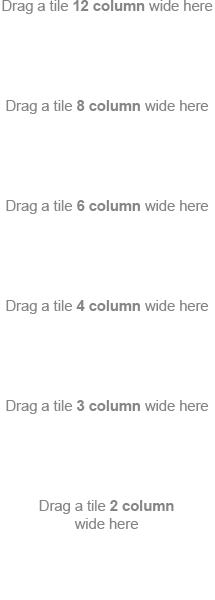
<style>
.page{position:relative;width:215px;height:600px;background:#ffffff}
.page>*{position:absolute;margin:0}
.t1{font:14.7px "ArialMT";color:#868686}
.t2{font:14.7px "Arial-BoldMT";color:#868686}
</style>
<div class="page">
<p class="t1" style="left:2px;top:0px;width:211px;height:14px">Drag a tile <span class="t2">12 column</span> wide here</p>
<p class="t1" style="left:6px;top:100px;width:203px;height:14px">Drag a tile <span class="t2">8 column</span> wide here</p>
<p class="t1" style="left:6px;top:200px;width:203px;height:14px">Drag a tile <span class="t2">6 column</span> wide here</p>
<p class="t1" style="left:6px;top:300px;width:203px;height:14px">Drag a tile <span class="t2">4 column</span> wide here</p>
<p class="t1" style="left:6px;top:400px;width:203px;height:14px">Drag a tile <span class="t2">3 column</span> wide here</p>
<p class="t1" style="left:39px;top:500px;width:135px;height:29px;text-align:center">Drag a tile <span class="t2">2 column</span><br>wide here</p>
</div>
